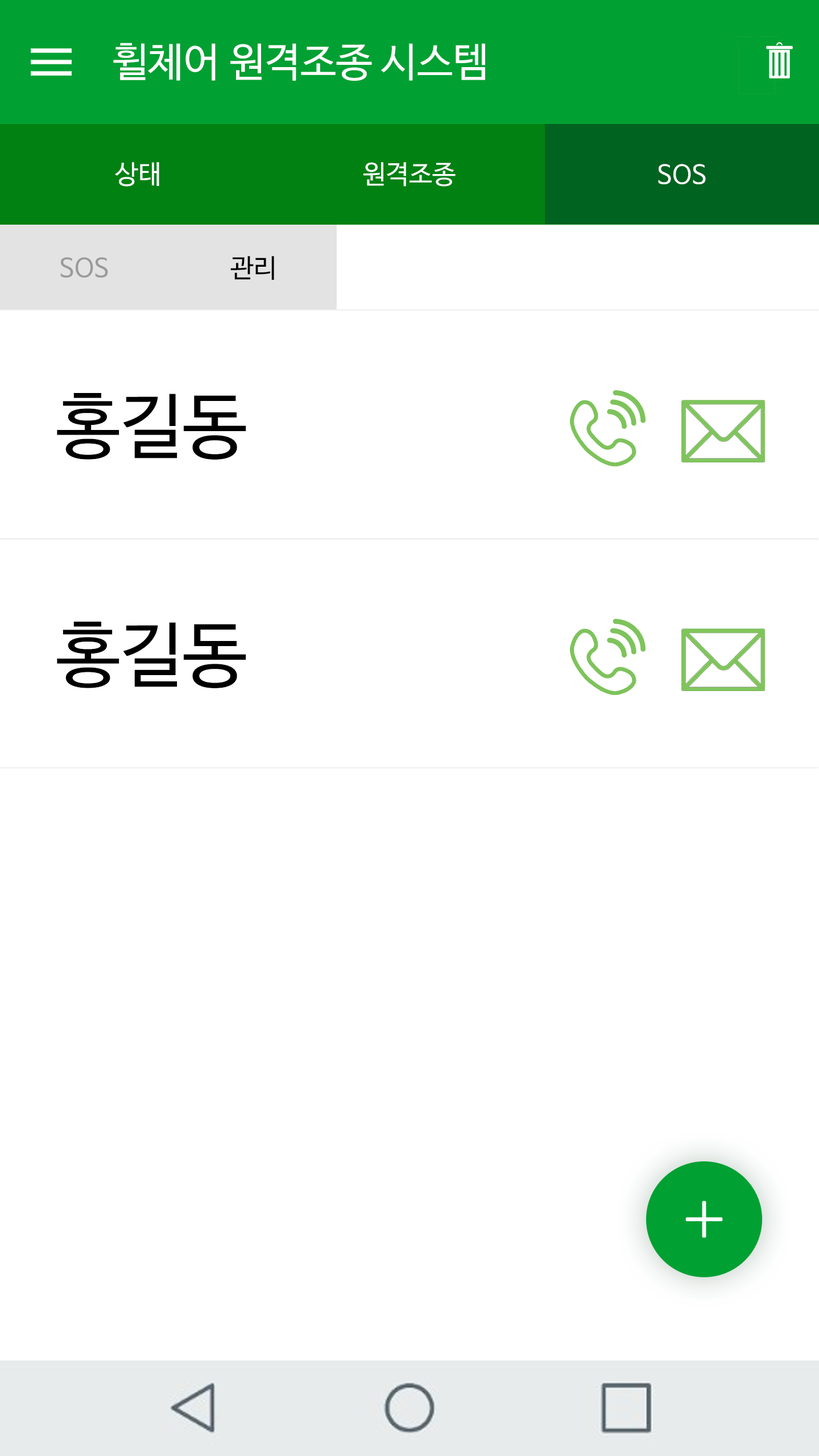
<style>
.page{position:relative;width:819px;height:1456px;background:#ffffff}
.page>*{position:absolute;margin:0}
.t1{font:40.3px "NanumBarunGothicOTF";color:#ffffff}
.t2{font:26.1px "NanumBarunGothicOTF";color:#ffffff}
.t3{font:26.1px "NanumBarunGothicOTF";color:#9a9a9a}
.t4{font:26.1px "NanumBarunGothicOTF";color:#000000}
.t5{font:71.1px "NanumBarunGothicOTF";color:#000000}
</style>
<div class="page">
<p class="t1" style="left:113px;top:43px;width:372px;height:38px">휠체어 원격조종 시스템</p>
<p class="t2" style="left:115px;top:162px;width:44px;height:25px">상태</p>
<p class="t2" style="left:363px;top:162px;width:93px;height:25px">원격조종</p>
<p class="t2" style="left:658px;top:164px;width:48px;height:20px">SOS</p>
<p class="t3" style="left:60px;top:257px;width:48px;height:21px">SOS</p>
<p class="t4" style="left:230px;top:256px;width:44px;height:24px">관리</p>
<p class="t5" style="left:57px;top:393px;width:189px;height:67px">홍길동</p>
<p class="t5" style="left:57px;top:622px;width:189px;height:66px">홍길동</p>
</div>
